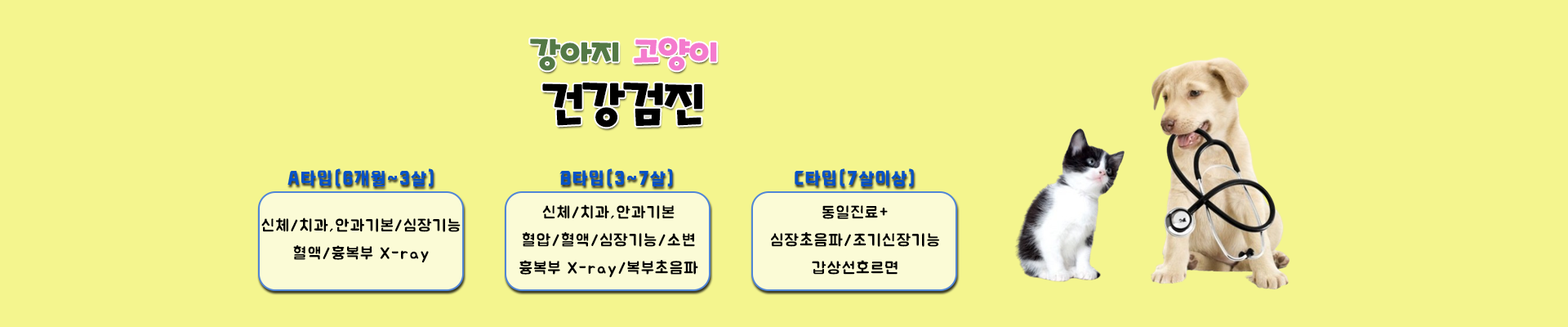
<style>
.page{position:relative;width:1568px;height:327px;background:#f4f58e}
.page>*{position:absolute;margin:0}
.t1{font:57.2px/54.7px "TTPinkfongBabySharkB";letter-spacing:-0.05em;color:#000000}
.t2{font:40.8px/54.7px "TTPinkfongBabySharkB";letter-spacing:-0.05em;color:#537945}
.t3{font:40.8px/54.7px "TTPinkfongBabySharkB";letter-spacing:-0.05em;color:#f47bce}
.t4{font:16.3px "Giants-Bold";letter-spacing:0.08em;color:#0552c7}
.t5{font:16.3px/27.8px "BMJUA";letter-spacing:0.08em;color:#000000}
</style>
<div class="page">
<p class="t1" style="left:530px;top:38px;width:187px;height:89px;text-align:center"><span class="t2">강아지  </span><span class="t3">고양이<br></span>건강검진</p>
<p class="t4" style="left:287px;top:168px;width:147px;height:18px">A타입(6개월~3살)</p>
<p class="t4" style="left:559px;top:168px;width:114px;height:18px">B타입(3~7살)</p>
<p class="t4" style="left:795px;top:168px;width:119px;height:18px">C타입(7살이상)</p>
<p class="t5" style="left:519px;top:204px;width:179px;height:74px;text-align:center">신체/치과,안과기본<br>혈압/혈액/심장기능/소변<br>흉복부 X-ray/복부초음파</p>
<p class="t5" style="left:771px;top:205px;width:169px;height:69px;text-align:center">동일진료+심장초음파/조기신장기능<br>갑상선호르면</p>
<p class="t5" style="left:261px;top:217px;width:200px;height:46px;text-align:center">신체/치과,안과기본/심장기능<br>혈액/흉복부 X-ray</p>
</div>
